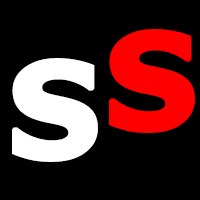
<style>
.page{position:relative;width:200px;height:200px;background:#000000}
.page>*{position:absolute;margin:0}
.t1{font:132px "Verdana-Bold";color:#ff0000;font-weight:bold}
.t2{font:132px "Verdana-Bold";color:#ffffff;font-weight:bold}
</style>
<div class="page">
<p class="t1" style="left:109px;top:29px;width:86px;height:104px">S</p>
<p class="t2" style="left:12px;top:58px;width:86px;height:104px">S</p>
</div>
